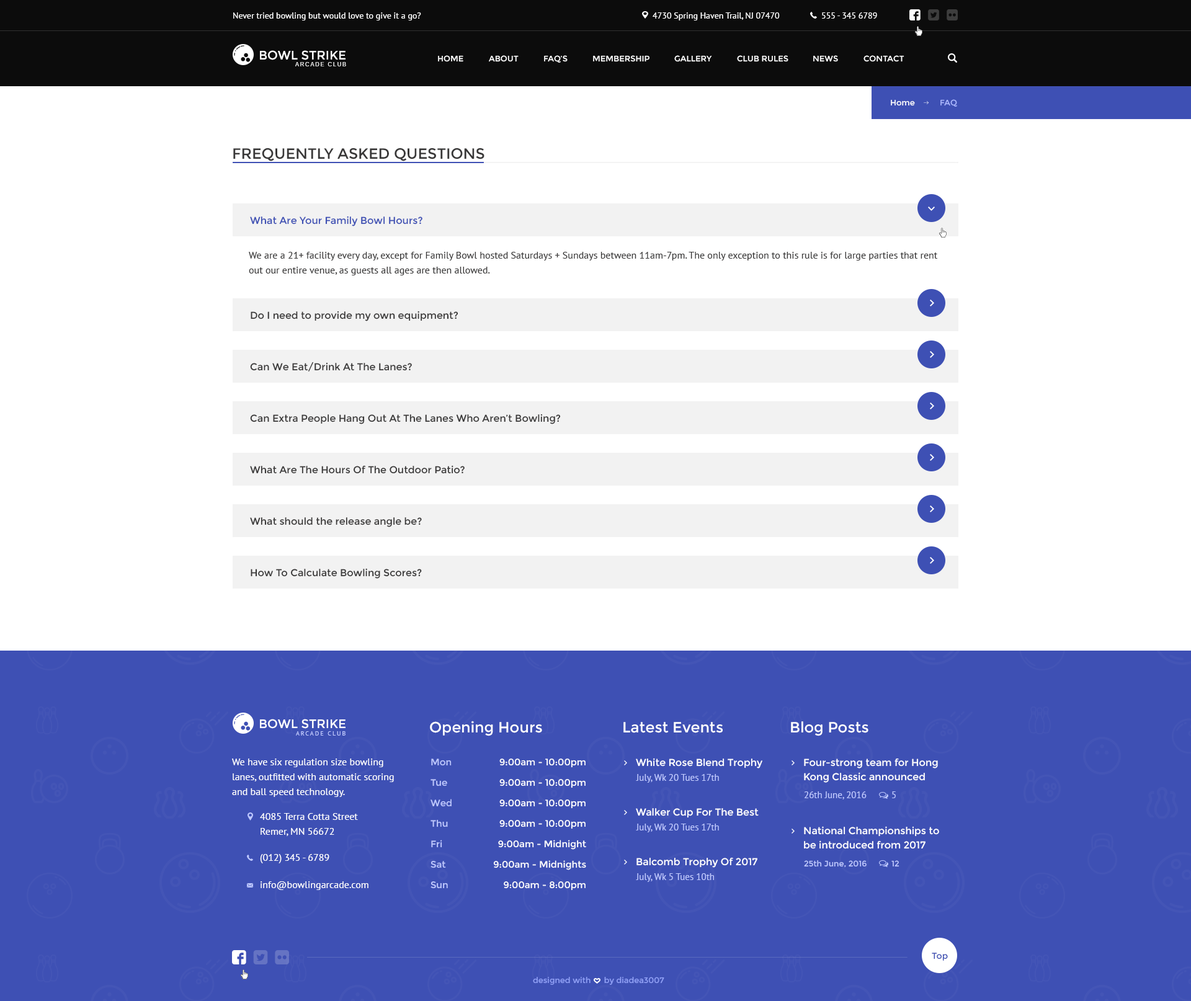
<style>
.page{position:relative;width:1191px;height:1001px;background:#ffffff}
.page>*{position:absolute;margin:0}
.t1{font:8.7px "PTSans-Regular";color:#ffffff}
.t2{font:12.4px "Montserrat-Regular";color:#ffffff;text-transform:uppercase}
.t3{font:5.6px "Arimo";letter-spacing:0.2em;color:#ffffff;text-transform:uppercase}
.t4{font:8.1px "Montserrat-Regular";color:#ffffff;text-transform:uppercase}
.t5{font:8.1px "Montserrat-Regular";color:#ffffff}
.t6{font:8.1px "Montserrat-Regular";color:#acb9ff}
.t7{font:14.9px "Montserrat-Regular";color:#393838;text-transform:uppercase}
.t8{font:9.9px "Montserrat-Regular";color:#3e50b4}
.t9{font:9.9px/14.9px "PTSans-Regular";color:#393838}
.t10{font:9.9px "Montserrat-Regular";color:#393838}
.t11{font:14.9px "Montserrat-Regular";color:#ffffff}
.t12{font:6.2px "PTSans-Regular";letter-spacing:0.2em;color:#bfc9ff;text-transform:uppercase}
.t13{font:9.9px/14.9px "PTSans-Regular";color:#ffffff}
.t14{font:9.3px/20.5px "Montserrat-Regular";color:#bfc9ff}
.t15{font:9.3px/20.5px "Montserrat-Regular";color:#ffffff}
.t16{font:9.9px "Montserrat-Regular";color:#ffffff}
.t17{font:9.9px/14.3px "Montserrat-Regular";color:#ffffff}
.t18{font:9.3px "PTSans-Regular";color:#bfc9ff}
.t19{font:9.3px "PTSans-Regular";color:#bfc9ff;text-transform:uppercase}
.t20{font:9.9px "PTSans-Regular";color:#ffffff}
.t21{font:8.1px "Montserrat-Regular";color:#bfc9ff}
.t22{font:8.1px "Montserrat-Regular";color:#bfc9ff;text-transform:uppercase}
.t23{font:8.7px "Montserrat-Regular";color:#3e50b4}
.t24{font:8.1px "Montserrat-Regular";color:#91a1f7}
</style>
<div class="page">
<p class="t1" style="left:233px;top:12px;width:188px;height:8px">Never tried bowling but would love to give it a go?</p>
<p class="t1" style="left:653px;top:12px;width:127px;height:8px">4730 Spring Haven Trail, NJ 07470</p>
<p class="t1" style="left:822px;top:12px;width:55px;height:7px">555 - 345 6789</p>
<p class="t2" style="left:260px;top:50px;width:86px;height:10px">Bowl Strike</p>
<p class="t3" style="left:295px;top:62px;width:51px;height:4px">arcade Club</p>
<p class="t4" style="left:438px;top:55px;width:25px;height:7px">Home</p>
<p class="t4" style="left:489px;top:55px;width:30px;height:7px">About</p>
<p class="t4" style="left:544px;top:55px;width:24px;height:8px">FAQ’s</p>
<p class="t4" style="left:593px;top:55px;width:56px;height:7px">membership</p>
<p class="t4" style="left:674px;top:55px;width:38px;height:7px">Gallery</p>
<p class="t4" style="left:737px;top:55px;width:51px;height:7px">club rules</p>
<p class="t4" style="left:813px;top:55px;width:25px;height:7px">News</p>
<p class="t4" style="left:863px;top:55px;width:41px;height:7px">contact</p>
<p class="t5" style="left:891px;top:100px;width:24px;height:6px">Home</p>
<p class="t6" style="left:940px;top:99px;width:17px;height:8px">FAQ</p>
<p class="t7" style="left:233px;top:148px;width:251px;height:13px">frequently asked questions</p>
<p class="t8" style="left:250px;top:216px;width:172px;height:10px">What Are Your Family Bowl Hours?</p>
<p class="t9" style="left:249px;top:252px;width:689px;height:23px">We are a 21+ facility every day, except for Family Bowl hosted Saturdays + Sundays between 11am-7pm. The only exception to this rule is for large parties that rent <br>out our entire venue, as guests all ages are then allowed.</p>
<p class="t10" style="left:251px;top:311px;width:207px;height:10px">Do I need to provide my own equipment?</p>
<p class="t10" style="left:250px;top:362px;width:162px;height:10px">Can We Eat/Drink At The Lanes?</p>
<p class="t10" style="left:250px;top:414px;width:311px;height:10px">Can Extra People Hang Out At The Lanes Who Aren’t Bowling?</p>
<p class="t10" style="left:250px;top:465px;width:215px;height:9px">What Are The Hours Of The Outdoor Patio?</p>
<p class="t10" style="left:250px;top:517px;width:172px;height:10px">What should the release angle be?</p>
<p class="t10" style="left:251px;top:568px;width:171px;height:11px">How To Calculate Bowling Scores?</p>
<p class="t2" style="left:260px;top:719px;width:86px;height:10px">Bowl strike</p>
<p class="t11" style="left:430px;top:721px;width:112px;height:15px">Opening Hours</p>
<p class="t11" style="left:623px;top:722px;width:100px;height:11px">Latest Events</p>
<p class="t11" style="left:791px;top:721px;width:77px;height:15px">Blog Posts</p>
<p class="t12" style="left:296px;top:731px;width:50px;height:5px">arcade Club</p>
<p class="t13" style="left:232px;top:759px;width:162px;height:38px">We have six regulation size bowling lanes, outfitted with automatic scoring and ball speed technology.</p>
<p class="t14" style="left:431px;top:759px;width:21px;height:130px">Mon<br>Tue<br>Wed<br>Thu<br>Fri<br>Sat<br>Sun</p>
<p class="t15" style="left:493px;top:759px;width:93px;height:132px;text-align:right">9:00am - 10:00pm<br>9:00am - 10:00pm<br>9:00am - 10:00pm<br>9:00am - 10:00pm<br>9:00am - Midnight<br>9:00am - Midnights<br>9:00am - 8:00pm</p>
<p class="t16" style="left:636px;top:758px;width:126px;height:11px">White Rose Blend Trophy</p>
<p class="t17" style="left:804px;top:758px;width:134px;height:25px">Four-strong team for Hong Kong Classic announced</p>
<p class="t18" style="left:636px;top:774px;width:83px;height:9px">July, Wk 20 Tues 17th</p>
<p class="t18" style="left:804px;top:792px;width:63px;height:8px">26th June, 2016</p>
<p class="t19" style="left:892px;top:792px;width:4px;height:6px">5</p>
<p class="t16" style="left:636px;top:808px;width:123px;height:10px">Walker Cup For The Best</p>
<p class="t13" style="left:260px;top:813px;width:98px;height:23px">4085 Terra Cotta Street<br>Remer, MN 56672</p>
<p class="t18" style="left:636px;top:824px;width:83px;height:8px">July, Wk 20 Tues 17th</p>
<p class="t17" style="left:804px;top:826px;width:135px;height:23px">National Championships to be introduced from 2017</p>
<p class="t20" style="left:260px;top:854px;width:69px;height:9px">(012) 345 - 6789</p>
<p class="t16" style="left:636px;top:857px;width:121px;height:11px">Balcomb Trophy Of 2017</p>
<p class="t21" style="left:804px;top:860px;width:63px;height:8px">25th June, 2016</p>
<p class="t22" style="left:891px;top:860px;width:8px;height:7px">12</p>
<p class="t20" style="left:261px;top:881px;width:107px;height:9px">info@bowlingarcade.com</p>
<p class="t18" style="left:636px;top:873px;width:78px;height:9px">July, Wk 5 Tues 10th</p>
<p class="t23" style="left:932px;top:953px;width:16px;height:8px">Top</p>
<p class="t24" style="left:533px;top:977px;width:131px;height:8px">designed with      by diadea3007</p>
</div>
